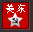
<style>
.page{position:relative;width:33px;height:32px;background:#c50000}
.page>*{position:absolute;margin:0}
.t1{font:10.4px "SimSun";color:#ffffff}
</style>
<div class="page">
<p class="t1" style="left:6px;top:4px;width:19px;height:9px">美东</p>
</div>
